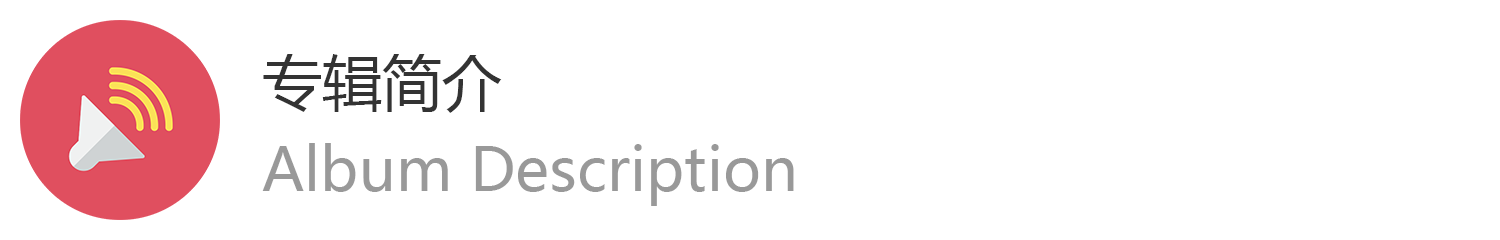
<style>
.page{position:relative;width:1500px;height:240px;background:#ffffff}
.page>*{position:absolute;margin:0}
.t1{font:60px "MicrosoftYaHei";color:#333333}
.t2{font:60px "MicrosoftYaHei";color:#999999}
</style>
<div class="page">
<p class="t1" style="left:263px;top:54px;width:239px;height:59px">专辑简介</p>
<p class="t2" style="left:262px;top:143px;width:532px;height:63px">Album Description</p>
</div>
